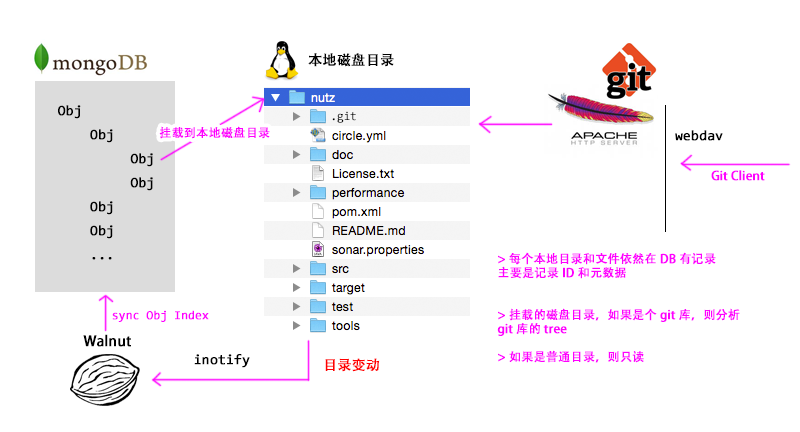
<style>
.page{position:relative;width:800px;height:432px;background:#ffffff}
.page>*{position:absolute;margin:0}
.t1{font:14px "AdobeHeitiStd-Regular";color:#000000;font-weight:bold}
.t2{font:14px/24px "Consolas";color:#000000;font-weight:bold}
.t3{font:12px "AdobeHeitiStd-Regular";color:#ff00ff;font-weight:bold}
.t4{font:14px "Consolas";color:#000000;font-weight:bold}
.t5{font:12px/14px "AdobeHeitiStd-Regular";color:#ff00ff;font-weight:bold}
.t6{font:12px "Consolas";color:#ff00ff;font-weight:bold}
.t7{font:14px "AdobeHeitiStd-Regular";color:#ff0000;font-weight:bold}
</style>
<div class="page">
<p class="t1" style="left:308px;top:53px;width:86px;height:14px">本地磁盘目录</p>
<p class="t2" style="left:58px;top:105px;width:95px;height:155px">Obj<br>    Obj<br>         Obj<br>         Obj<br>    Obj<br>    Obj<br>    ...</p>
<p class="t3" style="left:159px;top:126px;width:111px;height:13px">挂载到本地磁盘目录</p>
<p class="t4" style="left:675px;top:130px;width:48px;height:11px">webdav</p>
<p class="t3" style="left:711px;top:170px;width:54px;height:11px">Git Client</p>
<p class="t5" style="left:497px;top:252px;width:243px;height:111px">&gt; 每个本地目录和文件依然在 DB 有记录<br>主要是记录 ID 和元数据<br><br><br>&gt; 挂载的磁盘目录，如果是个 git 库，则分析<br>git 库的 tree<br><br>&gt; 如果是普通目录，则只读</p>
<p class="t6" style="left:112px;top:310px;width:97px;height:12px">sync Obj Index</p>
<p class="t1" style="left:83px;top:334px;width:48px;height:13px">Walnut</p>
<p class="t4" style="left:194px;top:354px;width:56px;height:14px">inotify</p>
<p class="t7" style="left:325px;top:358px;width:55px;height:14px">目录变动</p>
</div>
